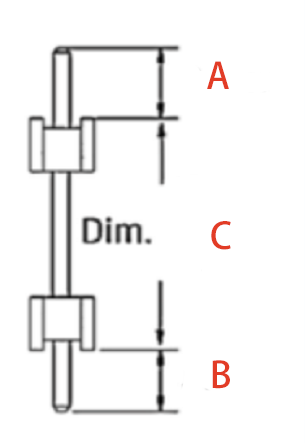
<style>
.page{position:relative;width:305px;height:443px;background:#ffffff}
.page>*{position:absolute;margin:0}
.t1{font:36px "AdobeHeitiStd-Regular";letter-spacing:-0.075em;color:#e23c26}
</style>
<div class="page">
<p class="t1" style="left:207px;top:61px;width:22px;height:28px">A</p>
<p class="t1" style="left:211px;top:221px;width:20px;height:29px">C</p>
<p class="t1" style="left:212px;top:360px;width:18px;height:29px">B</p>
</div>
